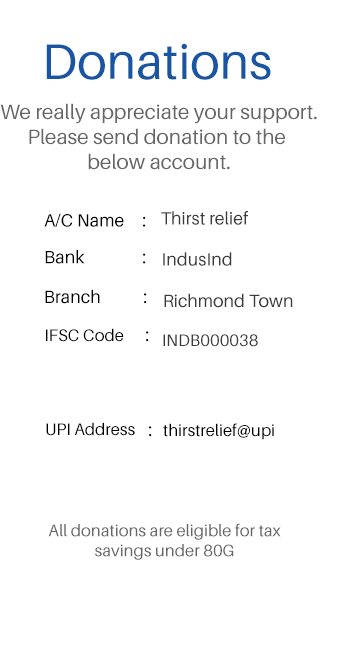
<style>
.page{position:relative;width:364px;height:650px;background:#ffffff}
.page>*{position:absolute;margin:0}
.t1{font:50px "Aileron-Regular";color:#1856a3}
.t2{font:20.8px "Aileron-Regular";color:#666666}
.t3{font:17.9px "Aileron-Regular";color:#000000}
.t4{font:17.9px "Aileron-Regular";color:#3b3b3b}
.t5{font:16.7px "Aileron-Regular";color:#000000}
.t6{font:16.7px "Aileron-Regular";color:#3b3b3b}
.t7{font:16.7px "Aileron-Regular";color:#666666}
</style>
<div class="page">
<p class="t1" style="left:46px;top:43px;width:225px;height:37px">Donations</p>
<p class="t2" style="left:0px;top:103px;width:317px;height:67px;text-align:center">We really appreciate your support.<br>Please send donation to the <br>below account.</p>
<p class="t3" style="left:44px;top:213px;width:80px;height:14px">A/C Name</p>
<p class="t3" style="left:143px;top:216px;width:3px;height:11px">:</p>
<p class="t4" style="left:161px;top:211px;width:87px;height:14px">Thirst relief</p>
<p class="t3" style="left:45px;top:250px;width:40px;height:14px">Bank</p>
<p class="t3" style="left:143px;top:253px;width:3px;height:11px">:</p>
<p class="t4" style="left:163px;top:252px;width:69px;height:14px">IndusInd</p>
<p class="t3" style="left:45px;top:289px;width:55px;height:15px">Branch</p>
<p class="t3" style="left:144px;top:293px;width:3px;height:11px">:</p>
<p class="t4" style="left:164px;top:293px;width:129px;height:15px">Richmond Town</p>
<p class="t5" style="left:46px;top:328px;width:78px;height:14px">IFSC Code</p>
<p class="t3" style="left:146px;top:331px;width:3px;height:11px">:</p>
<p class="t6" style="left:163px;top:334px;width:95px;height:13px">INDB000038</p>
<p class="t5" style="left:46px;top:422px;width:89px;height:14px">UPI Address</p>
<p class="t5" style="left:163px;top:423px;width:111px;height:17px">thirstrelief@upi</p>
<p class="t3" style="left:149px;top:426px;width:3px;height:11px">:</p>
<p class="t7" style="left:48px;top:523px;width:233px;height:37px;text-align:center">All donations are eligible for tax savings under 80G</p>
</div>
